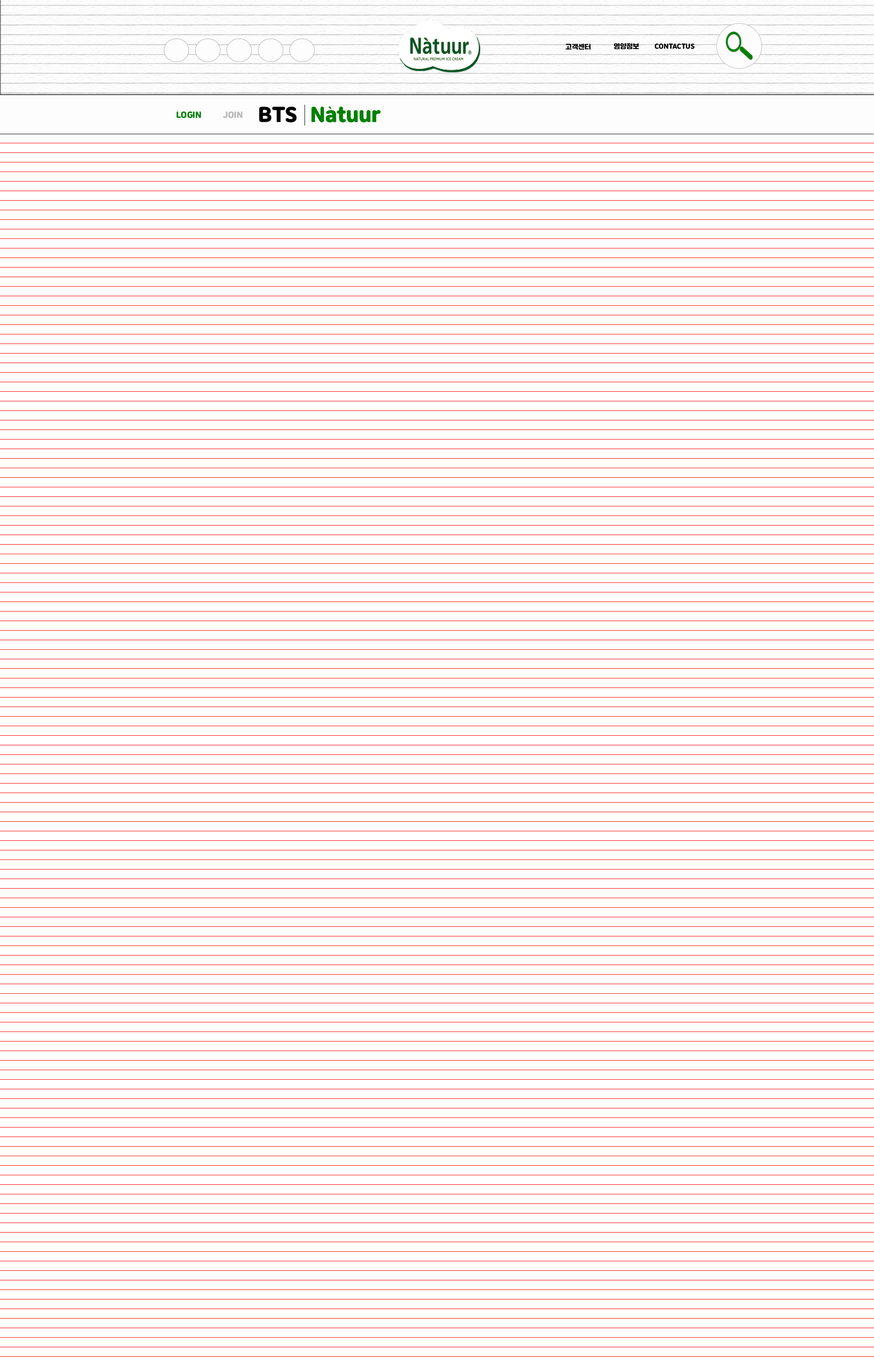
<style>
.page{position:relative;width:874px;height:1365px;background:#ffffff}
.page>*{position:absolute;margin:0}
.t1{font:10.9px "ygotjalnanfontOTF";color:#000000}
.t2{font:13.6px "ygotjalnanfontOTF";color:#008000}
.t3{font:13.6px "ygotjalnanfontOTF";color:#b9b8b8}
.t4{font:32.8px "ygotjalnanfontOTF";color:#000000}
</style>
<div class="page">
<p class="t1" style="left:565px;top:44px;width:26px;height:6px">고객센터</p>
<p class="t1" style="left:613px;top:43px;width:26px;height:6px">영양정보</p>
<p class="t1" style="left:654px;top:43px;width:40px;height:6px">CONTACTUS</p>
<p class="t2" style="left:177px;top:111px;width:24px;height:7px">LOGIN</p>
<p class="t3" style="left:223px;top:111px;width:20px;height:7px">JOIN</p>
<p class="t4" style="left:259px;top:106px;width:38px;height:16px">BTS</p>
</div>
